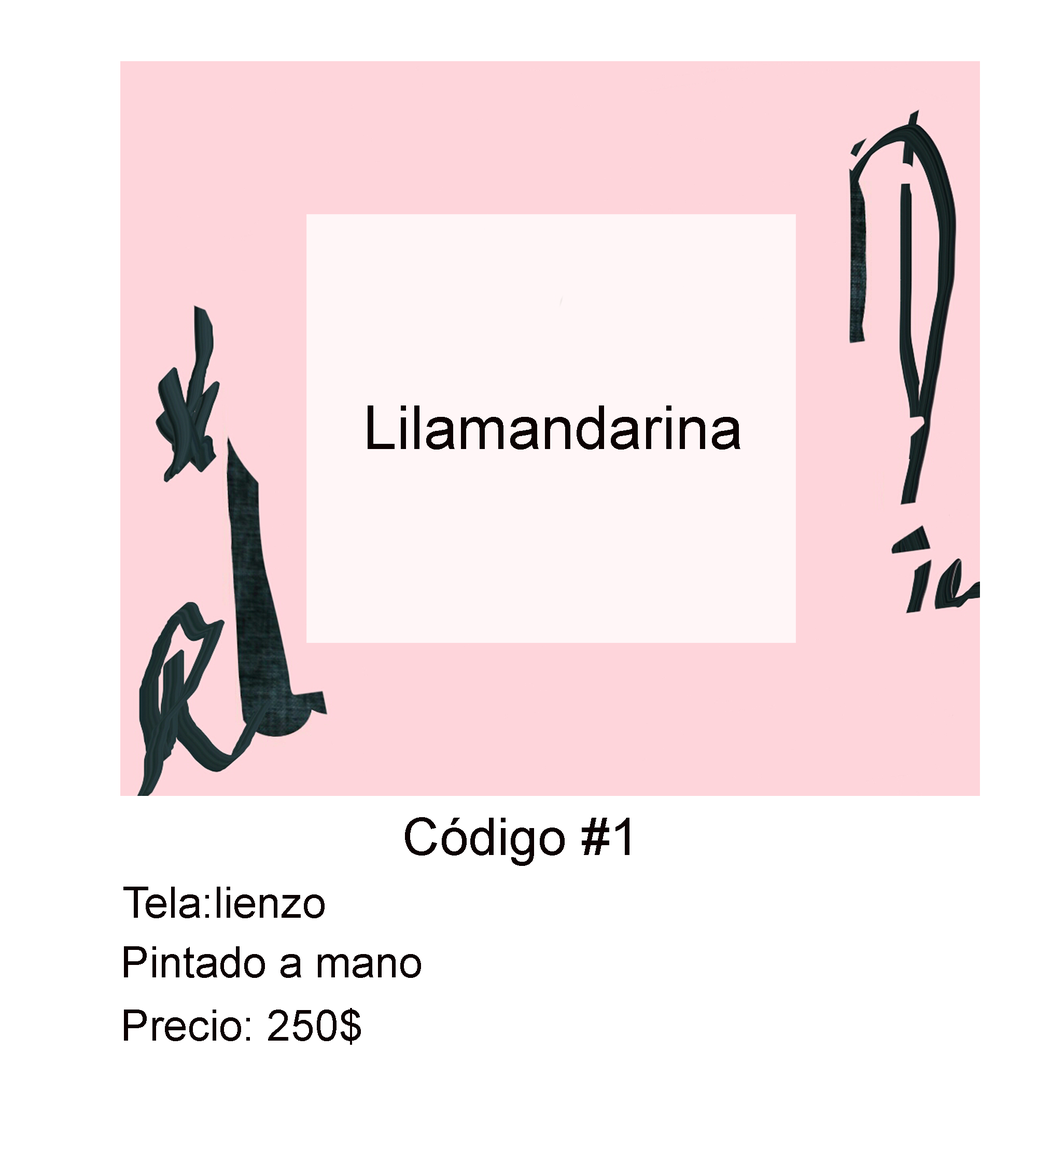
<style>
.page{position:relative;width:1037px;height:1149px;background:#ffffff}
.page>*{position:absolute;margin:0}
.t1{font:60.5px "ArialMT";color:#0c0202}
.t2{font:51.9px "ArialMT";color:#0c0202}
.t3{font:43.2px "ArialMT";color:#0c0202}
</style>
<div class="page">
<p class="t1" style="left:368px;top:406px;width:373px;height:44px">Lilamandarina</p>
<p class="t2" style="left:405px;top:817px;width:225px;height:49px">Código #1</p>
<p class="t3" style="left:123px;top:887px;width:202px;height:32px">Tela:lienzo</p>
<p class="t3" style="left:124px;top:947px;width:297px;height:31px">Pintado a mano</p>
<p class="t3" style="left:124px;top:1008px;width:237px;height:37px">Precio: 250$</p>
</div>
